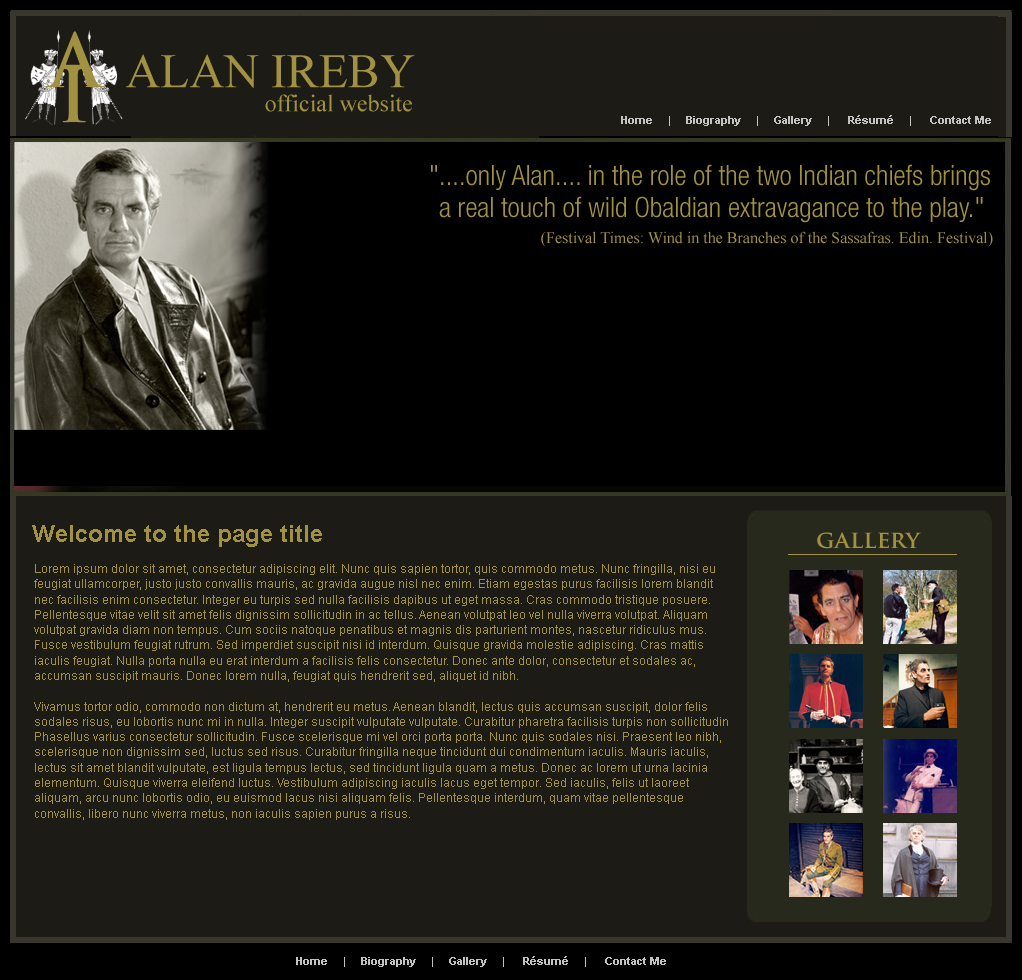
<style>
.page{position:relative;width:1022px;height:980px;background:#1c1b16}
.page>*{position:absolute;margin:0}
.t1{font:72px "TrajanPro-Bold";color:#a19140}
.t2{font:24px/24px "TimesNewRomanPSMT";color:#a19140}
.t3{font:48px/24px "TimesNewRomanPSMT";color:#a19140}
.t4{font:11px "Arial-BoldMT";color:#c3c3c3}
.t5{font:28px/32px "HelveticaNeue-LightCond";color:#a19140}
.t6{font:16px "TimesNewRomanPSMT";color:#a19140}
.t7{font:24px "Arial-BoldMT";color:#a19140}
.t8{font:24px "TrajanPro-Bold";color:#a19140}
.t9{font:12px/15.3px "ArialMT";color:#a19140}
</style>
<div class="page">
<p class="t1" style="left:45px;top:31px;width:60px;height:57px">A</p>
<p class="t2" style="left:126px;top:54px;width:289px;height:58px;text-align:right"><span class="t3">ALAN IREBY<br></span>official website</p>
<p class="t1" style="left:62px;top:67px;width:24px;height:56px">I</p>
<p class="t4" style="left:621px;top:115px;width:370px;height:11px">Home     |     Biography     |     Gallery     |      Résumé     |      Contact Me</p>
<p class="t5" style="left:431px;top:164px;width:559px;height:59px;text-align:right">"....only Alan.... in the role of the two Indian chiefs brings<br>a real touch of wild Obaldian extravagance to the play."</p>
<p class="t6" style="left:541px;top:231px;width:452px;height:16px">(Festival Times: Wind in the Branches of the Sassafras. Edin. Festival)</p>
<p class="t7" style="left:32px;top:525px;width:290px;height:22px">Welcome to the page title</p>
<p class="t8" style="left:817px;top:532px;width:104px;height:17px">gallery</p>
<p class="t9" style="left:34px;top:564px;width:694px;height:256px">Lorem ipsum dolor sit amet, consectetur adipiscing elit. Nunc quis sapien tortor, quis commodo metus. Nunc fringilla, nisi eu<br>feugiat ullamcorper, justo justo convallis mauris, ac gravida augue nisl nec enim. Etiam egestas purus facilisis lorem blandit<br>nec facilisis enim consectetur. Integer eu turpis sed nulla facilisis dapibus ut eget massa. Cras commodo tristique posuere.<br>Pellentesque vitae velit sit amet felis dignissim sollicitudin in ac tellus. Aenean volutpat leo vel nulla viverra volutpat. Aliquam<br>volutpat gravida diam non tempus. Cum sociis natoque penatibus et magnis dis parturient montes, nascetur ridiculus mus.<br>Fusce vestibulum feugiat rutrum. Sed imperdiet suscipit nisi id interdum. Quisque gravida molestie adipiscing. Cras mattis<br>iaculis feugiat. Nulla porta nulla eu erat interdum a facilisis felis consectetur. Donec ante dolor, consectetur et sodales ac,<br>accumsan suscipit mauris. Donec lorem nulla, feugiat quis hendrerit sed, aliquet id nibh. <br><br>Vivamus tortor odio, commodo non dictum at, hendrerit eu metus. Aenean blandit, lectus quis accumsan suscipit, dolor felis<br>sodales risus, eu lobortis nunc mi in nulla. Integer suscipit vulputate vulputate. Curabitur pharetra facilisis turpis non sollicitudin<br>Phasellus varius consectetur sollicitudin. Fusce scelerisque mi vel orci porta porta. Nunc quis sodales nisi. Praesent leo nibh,<br>scelerisque non dignissim sed, luctus sed risus. Curabitur fringilla neque tincidunt dui condimentum iaculis. Mauris iaculis,<br>lectus sit amet blandit vulputate, est ligula tempus lectus, sed tincidunt ligula quam a metus. Donec ac lorem ut urna lacinia<br>elementum. Quisque viverra eleifend luctus. Vestibulum adipiscing iaculis lacus eget tempor. Sed iaculis, felis ut laoreet<br>aliquam, arcu nunc lobortis odio, eu euismod lacus nisi aliquam felis. Pellentesque interdum, quam vitae pellentesque <br>convallis, libero nunc viverra metus, non iaculis sapien purus a risus.</p>
<p class="t4" style="left:296px;top:956px;width:370px;height:11px">Home     |     Biography     |     Gallery     |      Résumé     |      Contact Me</p>
</div>
